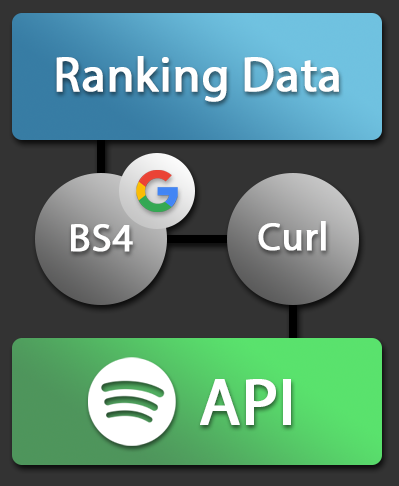
<style>
.page{position:relative;width:399px;height:486px;background:#333333}
.page>*{position:absolute;margin:0}
.t1{font:49px "MyriadPro-Regular";color:#ffffff;font-weight:bold}
.t2{font:40px "MyriadPro-Regular";color:#ffffff;font-weight:bold}
.t3{font:67px "MyriadPro-Regular";color:#ffffff;font-weight:bold}
</style>
<div class="page">
<p class="t1" style="left:56px;top:56px;width:283px;height:46px">Ranking Data</p>
<p class="t2" style="left:258px;top:221px;width:68px;height:30px">Curl</p>
<p class="t2" style="left:71px;top:224px;width:62px;height:28px">BS4</p>
<p class="t3" style="left:200px;top:379px;width:91px;height:46px">API</p>
</div>
